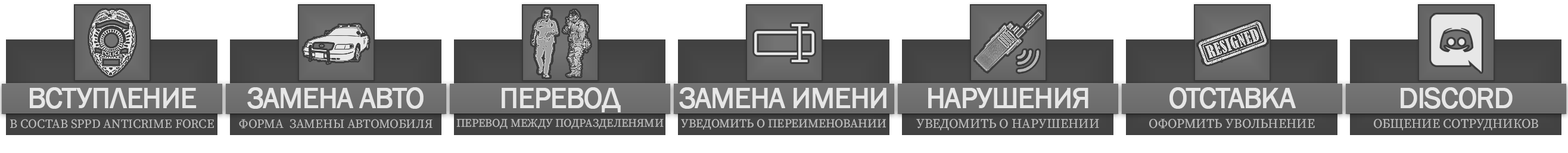
<style>
.page{position:relative;width:1568px;height:153px;background:#ffffff}
.page>*{position:absolute;margin:0}
.t1{font:29.8px "FranklinGothic-Book";letter-spacing:-0.04em;color:#e6e6e6;text-transform:uppercase;font-weight:bold}
.t2{font:12.5px "SourceSerifRoman-Regular";color:#bcbcbc;text-transform:uppercase}
.t3{font:11.3px "SourceSerifRoman-Regular";color:#bcbcbc;text-transform:uppercase}
.t4{font:11.9px "SourceSerifRoman-Regular";color:#bcbcbc;text-transform:uppercase}
.t5{font:13.1px "SourceSerifRoman-Regular";color:#bcbcbc;text-transform:uppercase}
</style>
<div class="page">
<p class="t1" style="left:30px;top:87px;width:167px;height:21px">ВСТУПЛЕНИЕ</p>
<p class="t1" style="left:247px;top:87px;width:177px;height:21px">ЗАМЕНА авто</p>
<p class="t1" style="left:502px;top:87px;width:119px;height:25px">перевод</p>
<p class="t1" style="left:679px;top:87px;width:207px;height:21px">ЗАМЕНА ИМЕНИ</p>
<p class="t1" style="left:928px;top:88px;width:160px;height:20px">НАРУШЕНИЯ</p>
<p class="t1" style="left:1169px;top:87px;width:127px;height:21px">ОТСТАВКА</p>
<p class="t1" style="left:1401px;top:87px;width:112px;height:21px">Discord</p>
<p class="t2" style="left:10px;top:119px;width:204px;height:9px">в состав SPPD ANtiCrime Force</p>
<p class="t2" style="left:239px;top:119px;width:194px;height:9px">форма  замены автомобиля</p>
<p class="t3" style="left:456px;top:118px;width:208px;height:11px">Перевод между подразделенями</p>
<p class="t4" style="left:681px;top:119px;width:205px;height:10px">Уведомить о переименовании</p>
<p class="t5" style="left:916px;top:119px;width:183px;height:11px">Уведомить о нарушении</p>
<p class="t5" style="left:1149px;top:119px;width:166px;height:9px">Оформить увольнение</p>
<p class="t5" style="left:1374px;top:119px;width:164px;height:11px">ОБЩЕНИЕ СОТРУДНИКОВ</p>
</div>
